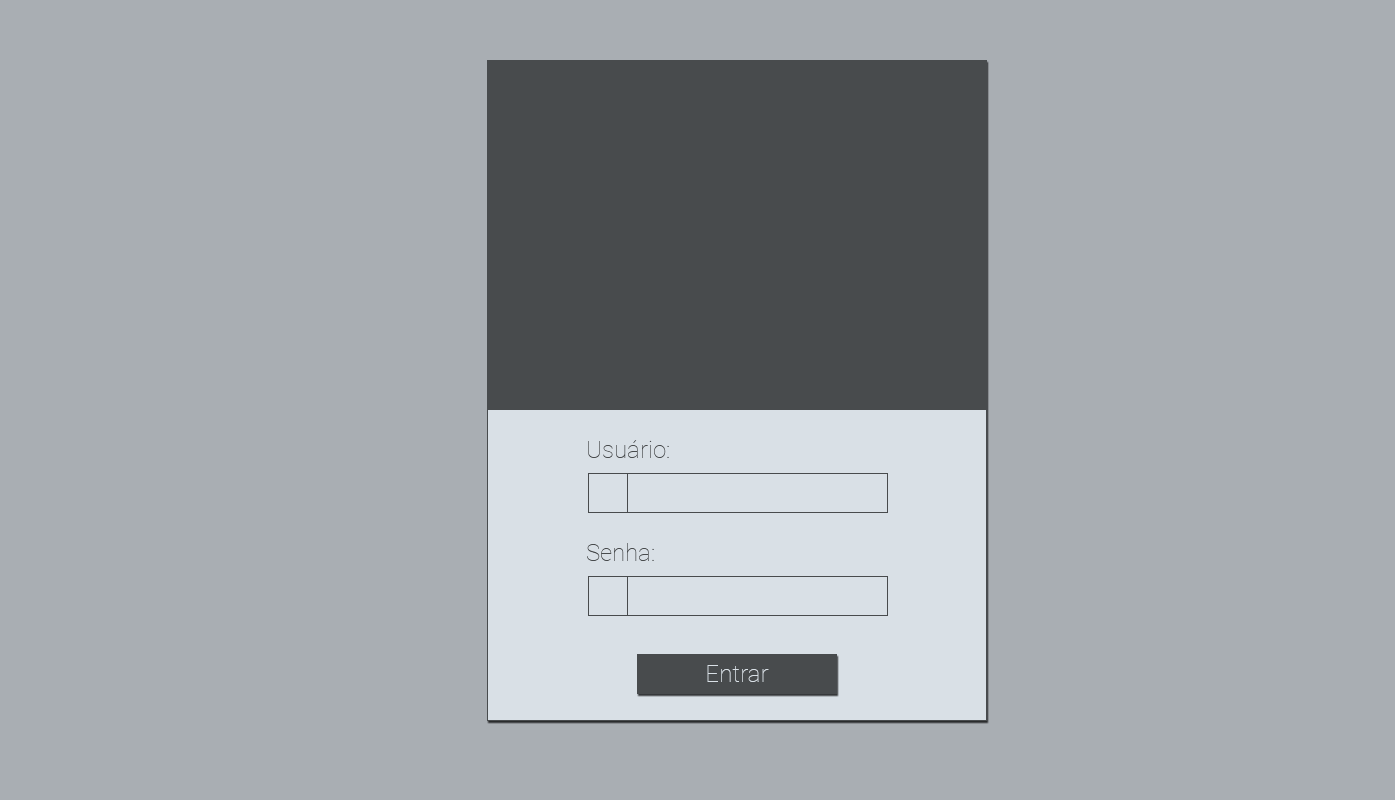
<style>
.page{position:relative;width:1395px;height:800px;background:#a9aeb3}
.page>*{position:absolute;margin:0}
.t1{font:24px "Roboto-Thin";color:#484b4d}
.t2{font:24px "Roboto-Thin";color:#d9e0e6}
</style>
<div class="page">
<p class="t1" style="left:588px;top:440px;width:81px;height:18px">Usuário:</p>
<p class="t1" style="left:587px;top:543px;width:67px;height:18px">Senha:</p>
<p class="t2" style="left:707px;top:665px;width:62px;height:17px">Entrar</p>
</div>
